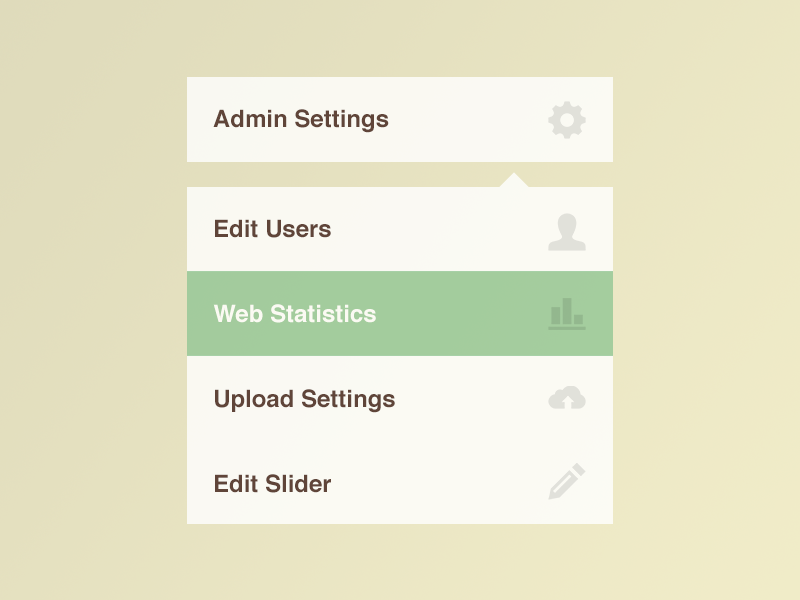
<style>
.page{position:relative;width:800px;height:600px}
.page>*{position:absolute;margin:0}
.t1{font:24px "Helvetica-Bold";color:#604539}
.t2{font:24px/85px "Helvetica-Bold";color:#604539}
.t3{font:24px/85px "Helvetica-Bold";color:#fbfaf3}
</style>
<div class="page">
<p class="t1" style="left:213px;top:109px;width:176px;height:24px">Admin Settings</p>
<p class="t2" style="left:213px;top:219px;width:182px;height:274px">Edit Users<br><span class="t3">Web Statistics<br></span>Upload Settings<br>Edit Slider</p>
</div>
